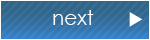
<style>
.page{position:relative;width:150px;height:40px}
.page>*{position:absolute;margin:0}
.t1{font:20px "CenturyGothic";color:#ffffff}
</style>
<div class="page">
<p class="t1" style="left:53px;top:10px;width:41px;height:15px">next</p>
</div>
